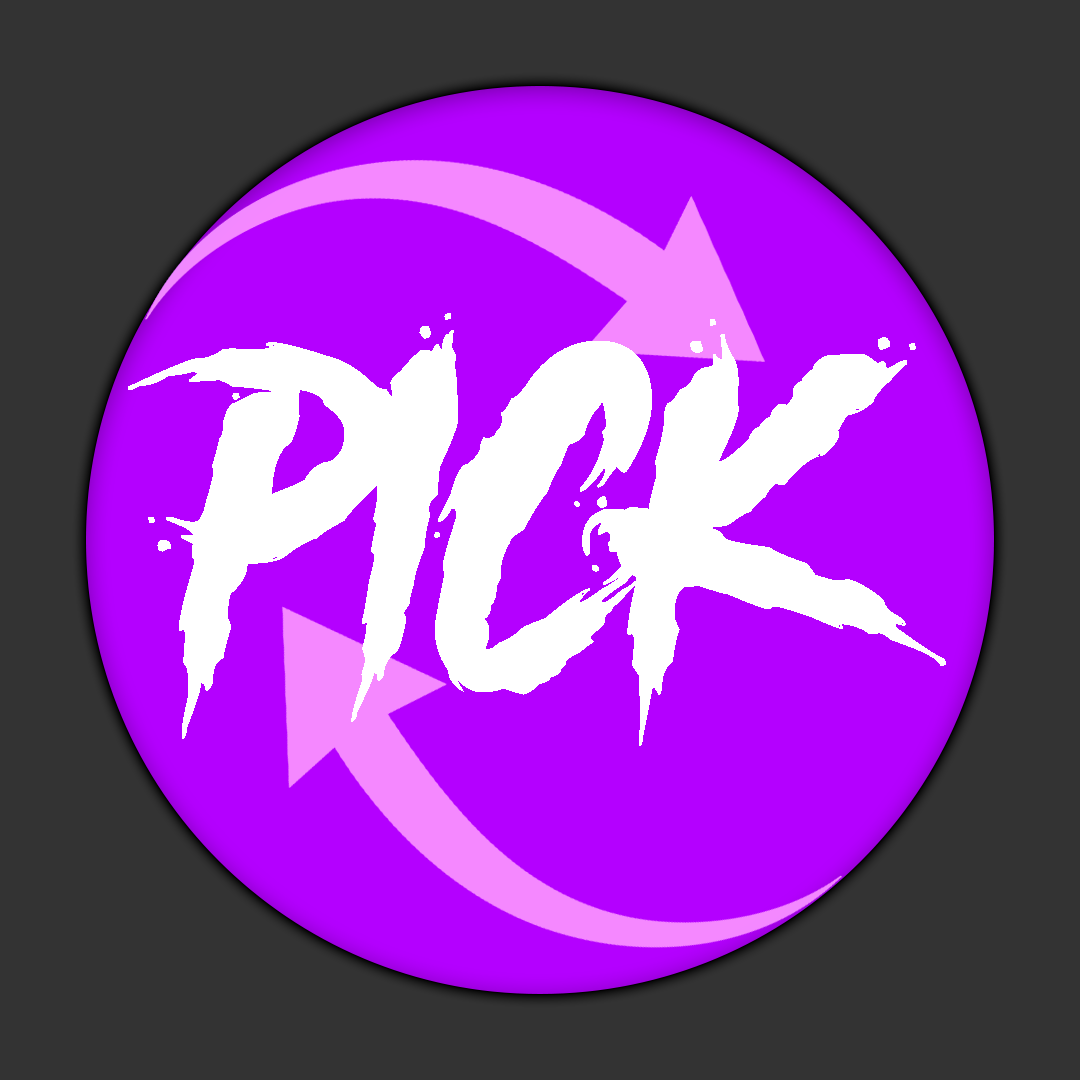
<style>
.page{position:relative;width:1080px;height:1080px;background:#333333}
.page>*{position:absolute;margin:0}
.t1{font:390.7px "AnotherDangerDemo";color:#ffffff}
</style>
<div class="page">
<p class="t1" style="left:128px;top:313px;width:818px;height:433px">pick</p>
</div>
